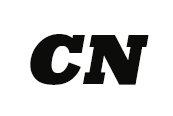
<style>
.page{position:relative;width:173px;height:116px;background:#ffffff}
.page>*{position:absolute;margin:0}
.t1{font:72px "Rockwell-ExtraBold";color:#0c0c0a;font-style:italic}
</style>
<div class="page">
<p class="t1" style="left:30px;top:34px;width:119px;height:51px">CN</p>
</div>
